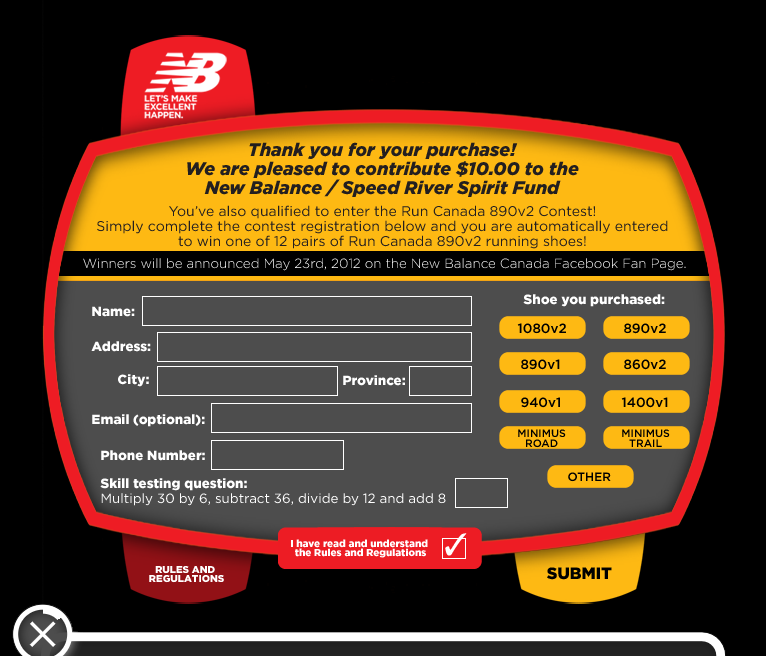
<style>
.page{position:relative;width:766px;height:656px;background:#000000}
.page>*{position:absolute;margin:0}
.t1{font:18px/19px "Gotham-BlackItalic";color:#231f20}
.t2{font:14px/15px "Gotham-Book";color:#231f20}
.t3{font:13.3px "Gotham-Light";color:#ffffff}
.t4{font:13.3px "Gotham-Black";color:#ffffff}
.t5{font:13.3px "Gotham-Medium";color:#000000}
.t6{font:10.6px/10.4px "Gotham-Medium";color:#000000}
.t7{font:12px "Gotham-Medium";color:#000000}
.t8{font:13.3px/15px "Gotham-Book";color:#ffffff}
.t9{font:13.3px/20px "Gotham-Black";color:#ffffff}
.t10{font:9.9px/9px "Gotham-Black";color:#ffffff}
.t11{font:16.3px "Gotham-Black";color:#000000}
</style>
<div class="page">
<p class="t1" style="left:187px;top:142px;width:392px;height:55px;text-align:center">Thank you for your purchase! <br>We are pleased to contribute $10.00 to the <br>New Balance / Speed River Spirit Fund</p>
<p class="t2" style="left:97px;top:205px;width:571px;height:44px;text-align:center">You’ve also qualified to enter the Run Canada 890v2 Contest! <br>Simply complete the contest registration below and you are automatically entered <br>to win one of 12 pairs of Run Canada 890v2 running shoes!</p>
<p class="t3" style="left:83px;top:258px;width:603px;height:13px">Winners will be announced May 23rd, 2012 on the New Balance Canada Facebook Fan Page.</p>
<p class="t4" style="left:523px;top:294px;width:142px;height:13px">Shoe you purchased:</p>
<p class="t4" style="left:92px;top:306px;width:43px;height:11px">Name:</p>
<p class="t5" style="left:517px;top:323px;width:49px;height:11px">1080v2</p>
<p class="t5" style="left:624px;top:323px;width:42px;height:11px">890v2</p>
<p class="t4" style="left:91px;top:341px;width:60px;height:11px">Address:</p>
<p class="t5" style="left:521px;top:359px;width:39px;height:11px">890v1</p>
<p class="t5" style="left:624px;top:359px;width:42px;height:11px">860v2</p>
<p class="t4" style="left:118px;top:374px;width:31px;height:13px">City:</p>
<p class="t4" style="left:343px;top:375px;width:62px;height:11px">Province:</p>
<p class="t5" style="left:521px;top:397px;width:39px;height:11px">940v1</p>
<p class="t5" style="left:621px;top:397px;width:47px;height:11px">1400v1</p>
<p class="t4" style="left:92px;top:414px;width:113px;height:13px">Email (optional):</p>
<p class="t6" style="left:518px;top:429px;width:48px;height:19px;text-align:center">MINIMUS<br>ROAD</p>
<p class="t6" style="left:622px;top:429px;width:48px;height:18px;text-align:center">MINIMUS<br>TRAIL</p>
<p class="t4" style="left:101px;top:450px;width:104px;height:11px">Phone Number:</p>
<p class="t7" style="left:568px;top:472px;width:43px;height:10px">OTHER</p>
<p class="t8" style="left:100px;top:478px;width:346px;height:28px"><span class="t9">Skill testing question: <br></span>Multiply 30 by 6, subtract 36, divide by 12 and add 8</p>
<p class="t10" style="left:291px;top:539px;width:137px;height:19px;text-align:center">I have read and understand <br>the Rules and Regulations</p>
<p class="t10" style="left:149px;top:566px;width:75px;height:17px;text-align:center">RULES AND <br>REGULATIONS</p>
<p class="t11" style="left:547px;top:567px;width:65px;height:13px">SUBMIT</p>
</div>
